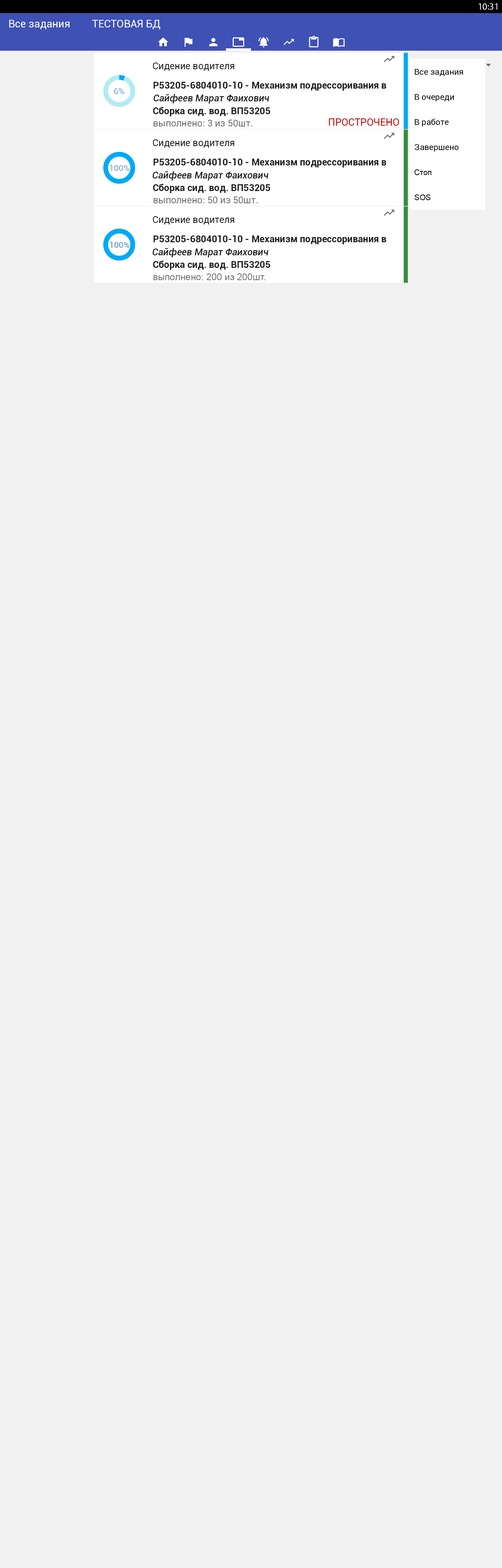
<style>
.page{position:relative;width:502px;height:1568px;background:#f1f1f1}
.page>*{position:absolute;margin:0}
.t1{font:9.4px "MyriadPro-Regular";color:#ffffff}
.t2{font:10.5px "Roboto-Regular";color:#ffffff}
.t3{font:9.4px "Roboto-Regular";color:#1f1f1f}
.t4{font:8.4px "Roboto-Regular";color:#000000}
.t5{font:8.4px "Roboto-Regular";color:#6c9cc4}
.t6{font:9.4px "Roboto-Bold";color:#1f1f1f}
.t7{font:9.4px "Roboto-MediumItalic";color:#1f1f1f}
.t8{font:9.4px "Roboto-Regular";color:#727272}
.t9{font:9.9px "Roboto-Regular";color:#cc0000}
.t10{font:7.8px "ArialMT";color:#000000}
.t11{font:8.4px "Roboto-Medium";color:#6c9cc4}
.t12{font:9.4px "ArialMT";color:#727272}
</style>
<div class="page">
<p class="t1" style="left:479px;top:3px;width:18px;height:7px">10:31</p>
<p class="t2" style="left:9px;top:20px;width:61px;height:9px">Все задания</p>
<p class="t2" style="left:92px;top:20px;width:68px;height:9px">ТЕСТОВАЯ БД</p>
<p class="t3" style="left:153px;top:62px;width:81px;height:9px">Сидение водителя</p>
<p class="t4" style="left:414px;top:69px;width:49px;height:7px">Все задания</p>
<p class="t5" style="left:114px;top:88px;width:10px;height:6px">6%</p>
<p class="t6" style="left:153px;top:82px;width:233px;height:9px">Р53205-6804010-10 - Механизм подрессоривания в</p>
<p class="t7" style="left:153px;top:94px;width:116px;height:9px">Сайфеев Марат Фаихович</p>
<p class="t4" style="left:414px;top:94px;width:40px;height:7px">В очереди</p>
<p class="t6" style="left:153px;top:107px;width:117px;height:9px">Сборка сид. вод. ВП53205</p>
<p class="t8" style="left:153px;top:120px;width:99px;height:6px">выполнено: 3 из 50шт.</p>
<p class="t9" style="left:329px;top:118px;width:70px;height:8px">ПРОСТРОЧЕНО</p>
<p class="t4" style="left:414px;top:119px;width:34px;height:7px">В работе</p>
<p class="t3" style="left:153px;top:139px;width:81px;height:9px">Сидение водителя</p>
<p class="t4" style="left:414px;top:144px;width:44px;height:8px">Завершено</p>
<p class="t6" style="left:153px;top:158px;width:233px;height:10px">Р53205-6804010-10 - Механизм подрессоривания в</p>
<p class="t5" style="left:110px;top:165px;width:19px;height:6px">100%</p>
<p class="t7" style="left:152px;top:171px;width:116px;height:10px">Сайфеев Марат Фаихович</p>
<p class="t10" style="left:414px;top:169px;width:17px;height:6px">Стоп</p>
<p class="t6" style="left:153px;top:184px;width:117px;height:9px">Сборка сид. вод. ВП53205</p>
<p class="t8" style="left:153px;top:197px;width:105px;height:6px">выполнено: 50 из 50шт.</p>
<p class="t10" style="left:414px;top:194px;width:16px;height:6px">SOS</p>
<p class="t3" style="left:153px;top:216px;width:81px;height:8px">Сидение водителя</p>
<p class="t11" style="left:110px;top:242px;width:20px;height:6px">100%</p>
<p class="t6" style="left:153px;top:235px;width:233px;height:9px">Р53205-6804010-10 - Механизм подрессоривания в</p>
<p class="t7" style="left:152px;top:248px;width:116px;height:9px">Сайфеев Марат Фаихович</p>
<p class="t6" style="left:153px;top:261px;width:117px;height:9px">Сборка сид. вод. ВП53205</p>
<p class="t12" style="left:153px;top:273px;width:112px;height:7px">выполнено: 200 из 200шт.</p>
</div>
